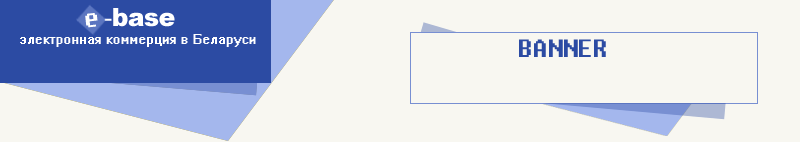
<style>
.page{position:relative;width:800px;height:142px;background:#f8f7f1}
.page>*{position:absolute;margin:0}
.t1{font:25px "Fixedsys";letter-spacing:-0.025em;color:#ffffff}
.t2{font:25px "Arial-Black";letter-spacing:-0.025em;color:#ffffff}
.t3{font:25px "ArialMT";letter-spacing:-0.025em;color:#ffffff}
.t4{font:12.5px "System";letter-spacing:0.005em;color:#ffffff}
.t5{font:25px "Fixedsys";letter-spacing:-0.025em;color:#2c4ba3}
</style>
<div class="page">
<p class="t1" style="left:85px;top:13px;width:13px;height:15px;rotate:-6deg">e</p>
<p class="t2" style="left:104px;top:8px;width:71px;height:19px"><span class="t3">-</span>base</p>
<p class="t4" style="left:20px;top:34px;width:236px;height:13px">электронная коммерция в Беларуси</p>
<p class="t5" style="left:519px;top:39px;width:87px;height:18px">BANNER</p>
</div>
